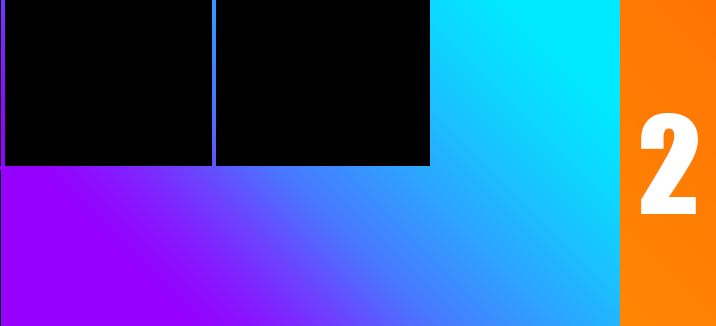
<style>
.page{position:relative;width:716px;height:326px;background:#000000}
.page>*{position:absolute;margin:0}
.t1{font:125px "Impact";color:#ffffff}
</style>
<div class="page">
<p class="t1" style="left:641px;top:113px;width:57px;height:101px">2</p>
</div>
